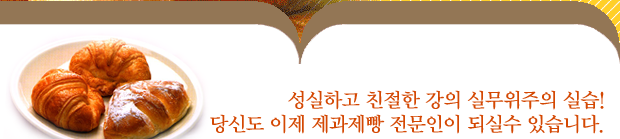
<style>
.page{position:relative;width:620px;height:139px;background:#ffffff}
.page>*{position:absolute;margin:0}
.t1{font:20px "YDIYMjO140-KSCPC-EUC-H";letter-spacing:-0.1em;color:#d44803}
</style>
<div class="page">
<p class="t1" style="left:210px;top:90px;width:394px;height:44px;text-align:right">성실하고 친절한 강의 실무위주의 실습!<br>당신도 이제 제과제빵 전문인이 되실수 있습니다.</p>
</div>
